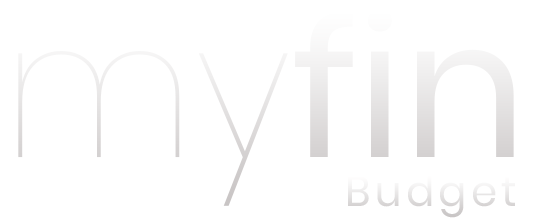
<style>
.page{position:relative;width:535px;height:221px;background:#ffffff}
.page>*{position:absolute;margin:0}
.t1{font:192px "Poppins-Regular";color:#eae9e9}
.t2{font:192px "Poppins-Thin";color:#eae9e9}
.t3{font:42px "Poppins-Regular";letter-spacing:0.1em;color:#e7e5e5}
</style>
<div class="page">
<p class="t1" style="left:18px;top:9px;width:496px;height:197px"><span class="t2">my</span>fin</p>
<p class="t3" style="left:348px;top:175px;width:167px;height:43px">Budget</p>
</div>
